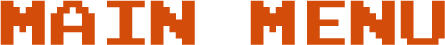
<style>
.page{position:relative;width:445px;height:45px;background:#d34c0a}
.page>*{position:absolute;margin:0}
.t1{font:50px "PressStartReg";color:#d34c0a}
</style>
<div class="page">
<p class="t1" style="left:0px;top:0px;width:445px;height:45px">MAIN MENU</p>
</div>
